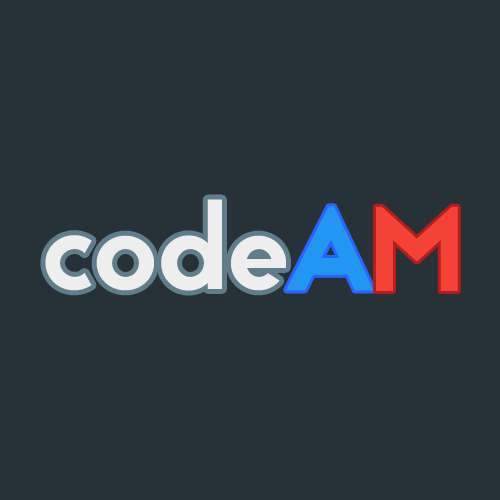
<style>
.page{position:relative;width:500px;height:500px;background:#263238}
.page>*{position:absolute;margin:0}
.t1{font:120px "Jaapokki-Regular";color:#eeeeee}
.t2{font:120px "Jaapokki-Regular";color:#2196f3}
.t3{font:120px "Jaapokki-Regular";color:#f44336}
</style>
<div class="page">
<p class="t1" style="left:45px;top:199px;width:241px;height:92px">code</p>
<p class="t2" style="left:286px;top:206px;width:88px;height:85px">A</p>
<p class="t3" style="left:376px;top:206px;width:82px;height:85px">M</p>
</div>
